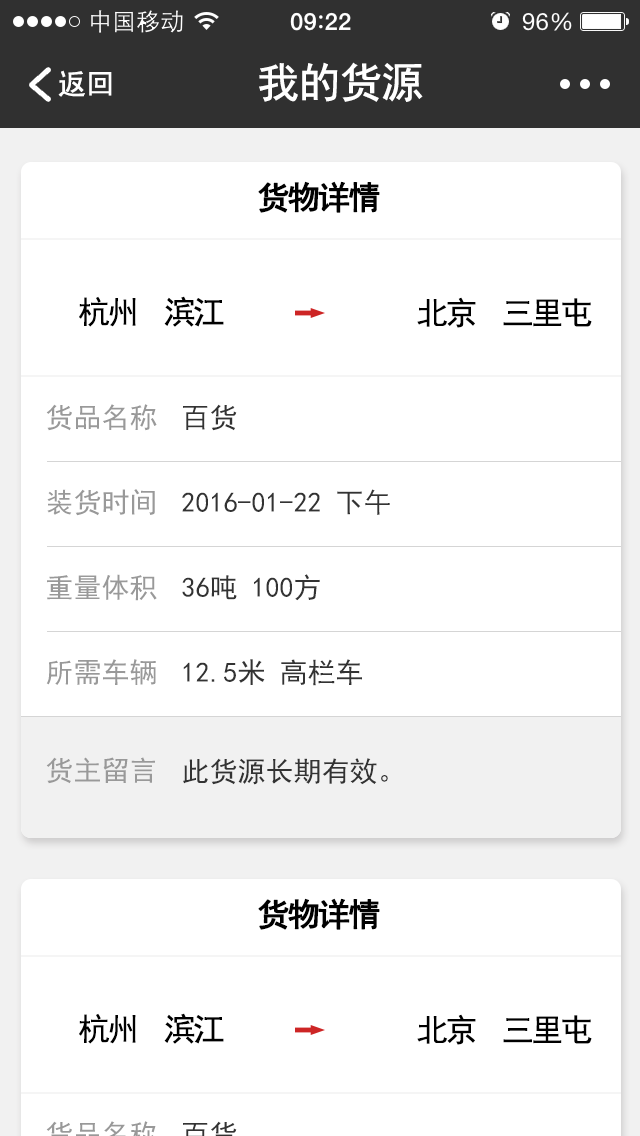
<style>
.page{position:relative;width:640px;height:1136px;background:#ffffff}
.page>*{position:absolute;margin:0}
.t1{font:42px "SimHei";letter-spacing:-0.04em;color:#ffffff;font-weight:bold}
.t2{font:28px "SimHei";color:#ffffff;font-weight:bold}
.t3{font:32px "SimHei";letter-spacing:-0.08em;color:#010101;font-weight:bold}
.t4{font:32px "SimHei";letter-spacing:-0.08em;color:#000000}
.t5{font:28px "SimHei";color:#999999}
.t6{font:28px "SimHei";color:#333333}
</style>
<div class="page">
<p class="t1" style="left:259px;top:62px;width:164px;height:40px">我的货源</p>
<p class="t2" style="left:58px;top:70px;width:54px;height:27px">返回</p>
<p class="t3" style="left:258px;top:181px;width:122px;height:32px">货物详情</p>
<p class="t4" style="left:79px;top:296px;width:145px;height:31px">杭州  滨江</p>
<p class="t4" style="left:417px;top:297px;width:175px;height:31px">北京  三里屯</p>
<p class="t5" style="left:46px;top:404px;width:111px;height:27px">货品名称</p>
<p class="t6" style="left:183px;top:404px;width:54px;height:27px">百货</p>
<p class="t5" style="left:47px;top:489px;width:108px;height:27px">装货时间</p>
<p class="t6" style="left:182px;top:489px;width:208px;height:26px">2016-01-22 下午</p>
<p class="t5" style="left:47px;top:574px;width:110px;height:27px">重量体积</p>
<p class="t6" style="left:182px;top:574px;width:138px;height:27px">36吨 100方</p>
<p class="t5" style="left:46px;top:659px;width:110px;height:26px">所需车辆</p>
<p class="t6" style="left:183px;top:659px;width:179px;height:27px">12.5米 高栏车</p>
<p class="t5" style="left:46px;top:757px;width:109px;height:27px">货主留言</p>
<p class="t6" style="left:183px;top:758px;width:205px;height:27px">此货源长期有效。</p>
<p class="t3" style="left:258px;top:898px;width:122px;height:32px">货物详情</p>
<p class="t4" style="left:79px;top:1013px;width:145px;height:31px">杭州  滨江</p>
<p class="t4" style="left:417px;top:1014px;width:175px;height:31px">北京  三里屯</p>
</div>
